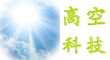
<style>
.page{position:relative;width:110px;height:60px;background:#ffffff}
.page>*{position:absolute;margin:0}
.t1{font:24px "Fashion-font,-made-by-www.6763.net";color:#add00c;text-transform:uppercase}
</style>
<div class="page">
<p class="t1" style="left:62px;top:6px;width:44px;height:48px;text-align:center">高空<br>科技</p>
</div>
